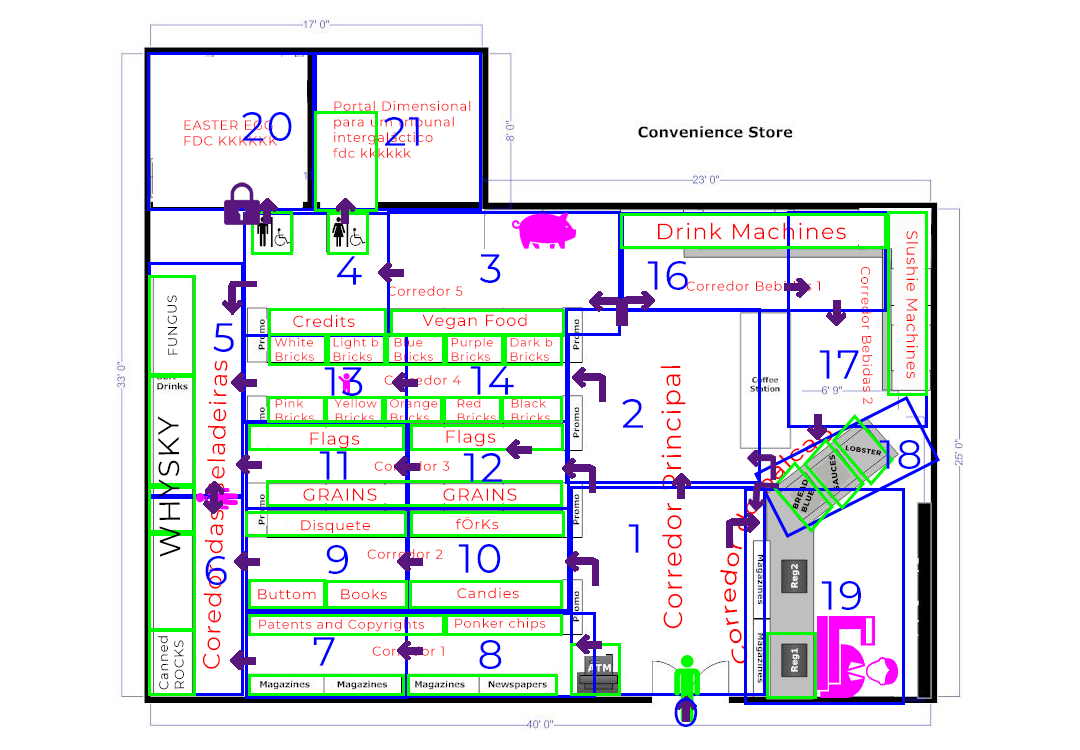
<style>
.page{position:relative;width:1080px;height:750px;background:#ffffff}
.page>*{position:absolute;margin:0}
.t1{font:13px "Montserrat-Regular";letter-spacing:0.06em;color:#ff0000}
.t2{font:40.4px "Montserrat-Regular";letter-spacing:0.06em;color:#0000ff}
.t3{font:22.1px "Montserrat-Regular";letter-spacing:0.06em;color:#ff0000}
.t4{font:15.5px "Montserrat-Regular";letter-spacing:0.06em;color:#ff0000}
.t5{font:13px "Montserrat-Regular";letter-spacing:0.06em;color:#000000}
.t6{font:15.9px "Montserrat-Regular";letter-spacing:0.06em;color:#ff0000}
.t7{font:11.8px "Montserrat-Regular";letter-spacing:0.06em;color:#ff0000}
.t8{font:24.1px "Montserrat-Regular";letter-spacing:0.06em;color:#ff0000}
.t9{font:26.1px "Montserrat-Regular";letter-spacing:0.06em;color:#ff0000}
.t10{font:29.3px "Montserrat-Regular";letter-spacing:0.06em;color:#000000}
.t11{font:17.6px "Montserrat-Regular";letter-spacing:0.06em;color:#ff0000}
.t12{font:6.9px "Montserrat-ExtraBold";letter-spacing:0.06em;color:#000000}
.t13{font:7.9px "Montserrat-ExtraBold";letter-spacing:0.06em;color:#000000}
.t14{font:7.8px "Montserrat-ExtraBold";letter-spacing:0.06em;color:#000000}
.t15{font:14.2px "Montserrat-Regular";letter-spacing:0.06em;color:#ff0000}
.t16{font:12.7px "Montserrat-Regular";letter-spacing:0.06em;color:#ff0000}
.t17{font:13px "Montserrat-Regular";letter-spacing:0.06em;color:#58167d}
</style>
<div class="page">
<p class="t1" style="left:333px;top:101px;width:138px;height:57px">Portal Dimensional<br>para um tribunal<br>intergaláctico<br>fdc kkkkkk</p>
<p class="t2" style="left:242px;top:112px;width:50px;height:29px">20</p>
<p class="t1" style="left:184px;top:120px;width:94px;height:26px">EASTER EGG <br>FDC KKKKKK</p>
<p class="t2" style="left:384px;top:117px;width:35px;height:29px">21</p>
<p class="t3" style="left:658px;top:222px;width:188px;height:18px">Drink Machines</p>
<p class="t4" style="left:906px;top:231px;width:12px;height:148px;rotate:90deg">Slushie Machines</p>
<p class="t2" style="left:337px;top:256px;width:25px;height:29px">4</p>
<p class="t2" style="left:479px;top:254px;width:22px;height:29px">3</p>
<p class="t2" style="left:647px;top:261px;width:41px;height:29px">16</p>
<p class="t1" style="left:860px;top:266px;width:13px;height:139px;rotate:89deg">Corredor Bebidas 2</p>
<p class="t1" style="left:686px;top:281px;width:134px;height:10px">Corredor Bebidas 1</p>
<p class="t1" style="left:387px;top:286px;width:76px;height:10px">Corredor 5</p>
<p class="t5" style="left:167px;top:295px;width:11px;height:60px;rotate:-91deg">FUNGUS</p>
<p class="t6" style="left:293px;top:315px;width:62px;height:12px">Credits</p>
<p class="t6" style="left:422px;top:314px;width:105px;height:15px">Vegan Food</p>
<p class="t2" style="left:213px;top:323px;width:21px;height:29px">5</p>
<p class="t7" style="left:275px;top:337px;width:39px;height:24px">White<br>Bricks</p>
<p class="t7" style="left:333px;top:337px;width:46px;height:24px">Light b<br>Bricks</p>
<p class="t7" style="left:394px;top:337px;width:39px;height:24px">Blue <br>Bricks</p>
<p class="t7" style="left:451px;top:337px;width:42px;height:24px">Purple<br>Bricks</p>
<p class="t7" style="left:510px;top:337px;width:43px;height:24px">Dark b <br>Bricks</p>
<p class="t2" style="left:819px;top:350px;width:40px;height:29px">17</p>
<p class="t8" style="left:203px;top:360px;width:25px;height:309px;rotate:-89deg">Coredor das Geladeiras</p>
<p class="t2" style="left:470px;top:366px;width:44px;height:29px">14</p>
<p class="t9" style="left:660px;top:366px;width:26px;height:263px;rotate:-90deg">Corredor Principal</p>
<p class="t2" style="left:324px;top:367px;width:39px;height:29px">13</p>
<p class="t1" style="left:384px;top:375px;width:77px;height:10px">Corredor 4</p>
<p class="t7" style="left:275px;top:398px;width:39px;height:24px">Pink<br>Bricks</p>
<p class="t7" style="left:334px;top:398px;width:43px;height:24px">Yellow<br>Bricks</p>
<p class="t7" style="left:390px;top:399px;width:48px;height:23px">Orange<br>Bricks</p>
<p class="t7" style="left:457px;top:398px;width:39px;height:24px">Red<br>Bricks</p>
<p class="t7" style="left:511px;top:398px;width:39px;height:24px">Black<br>Bricks</p>
<p class="t2" style="left:622px;top:399px;width:21px;height:29px">2</p>
<p class="t10" style="left:158px;top:416px;width:23px;height:141px;rotate:-91deg">WHYSKY</p>
<p class="t11" style="left:310px;top:431px;width:50px;height:18px">Flags</p>
<p class="t11" style="left:446px;top:429px;width:50px;height:18px">Flags</p>
<p class="t12" style="left:845px;top:445px;width:36px;height:11px;rotate:9deg">LOBSTER</p>
<p class="t2" style="left:879px;top:440px;width:42px;height:29px">18</p>
<p class="t2" style="left:319px;top:451px;width:28px;height:29px">11</p>
<p class="t1" style="left:374px;top:461px;width:76px;height:10px">Corredor 3</p>
<p class="t2" style="left:463px;top:453px;width:39px;height:29px">12</p>
<p class="t13" style="left:829px;top:454px;width:11px;height:37px;rotate:-98deg">SAUCES</p>
<p class="t14" style="left:792px;top:479px;width:23px;height:34px;rotate:-68deg">BREAD<br>BLUE</p>
<p class="t11" style="left:303px;top:488px;width:74px;height:13px">GRAINS</p>
<p class="t11" style="left:443px;top:488px;width:74px;height:13px">GRAINS</p>
<p class="t15" style="left:301px;top:519px;width:69px;height:14px">Disquete</p>
<p class="t15" style="left:456px;top:517px;width:43px;height:13px">fÖrKs</p>
<p class="t2" style="left:628px;top:524px;width:11px;height:29px">1</p>
<p class="t2" style="left:326px;top:545px;width:22px;height:29px">9</p>
<p class="t2" style="left:458px;top:544px;width:43px;height:29px">10</p>
<p class="t2" style="left:205px;top:556px;width:22px;height:29px">6</p>
<p class="t1" style="left:367px;top:549px;width:76px;height:10px">Corredor 2</p>
<p class="t2" style="left:821px;top:581px;width:40px;height:29px">19</p>
<p class="t15" style="left:258px;top:589px;width:58px;height:11px">Buttom</p>
<p class="t15" style="left:341px;top:588px;width:46px;height:12px">Books</p>
<p class="t15" style="left:457px;top:587px;width:62px;height:12px">Candies</p>
<p class="t16" style="left:259px;top:619px;width:165px;height:13px">Patents and Copyrights</p>
<p class="t16" style="left:455px;top:618px;width:91px;height:13px">Ponker chips</p>
<p class="t5" style="left:158px;top:636px;width:26px;height:54px;rotate:-91deg">Canned<br>ROCKS</p>
<p class="t2" style="left:313px;top:637px;width:22px;height:29px">7</p>
<p class="t2" style="left:479px;top:640px;width:23px;height:29px">8</p>
<p class="t17" style="left:372px;top:646px;width:72px;height:10px">Corredor 1</p>
<p class="t2" style="left:674px;top:698px;width:24px;height:29px">0</p>
</div>
